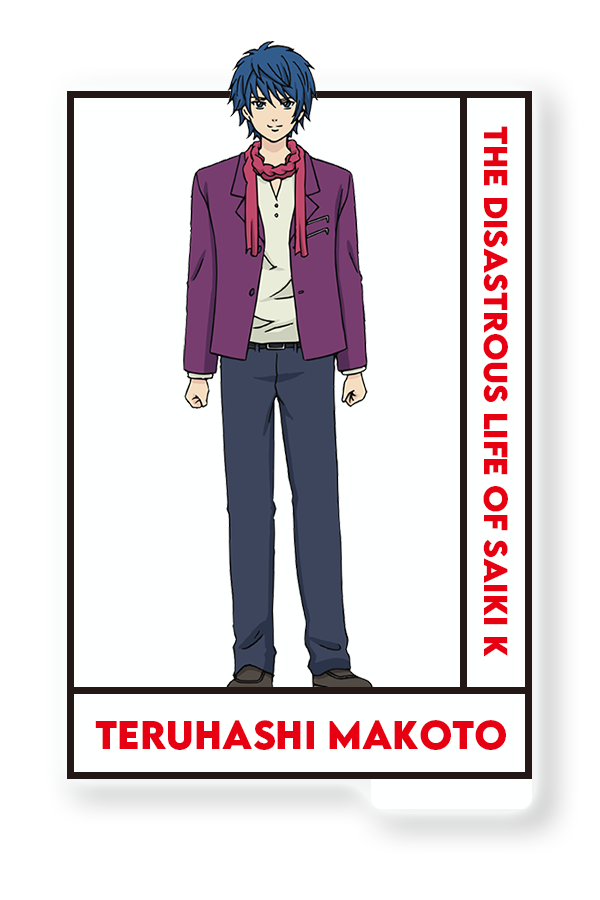
<style>
.page{position:relative;width:600px;height:900px;background:#feffff}
.page>*{position:absolute;margin:0}
.t1{font:29.6px "LEMONMILK-Bold";color:#e70012}
.t2{font:35.7px "LEMONMILK-Bold";color:#e70012}
</style>
<div class="page">
<p class="t1" style="left:483px;top:126px;width:25px;height:531px;rotate:90deg">THE disastrous Life of saiki K</p>
<p class="t2" style="left:95px;top:720px;width:411px;height:30px">Teruhashi Makoto</p>
</div>
